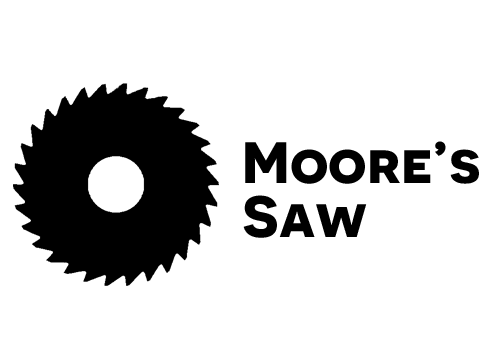
<style>
.page{position:relative;width:500px;height:360px;background:#ffffff}
.page>*{position:absolute;margin:0}
.t1{font:58.3px/54.2px "Novecentosanswide-Bold";color:#000000}
</style>
<div class="page">
<p class="t1" style="left:243px;top:141px;width:236px;height:97px">Moore’s<br>Saw</p>
</div>
